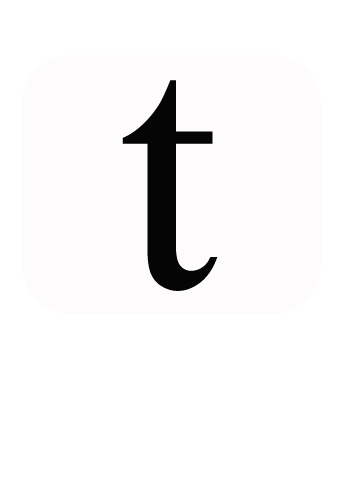
<style>
.page{position:relative;width:344px;height:486px;background:#ffffff}
.page>*{position:absolute;margin:0}
.t1{font:350px "TimesNewRomanPSMT";color:#050505}
</style>
<div class="page">
<p class="t1" style="left:122px;top:80px;width:96px;height:211px">t</p>
</div>
